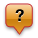
<style>
.page{position:relative;width:38px;height:38px;background:#ffffff}
.page>*{position:absolute;margin:0}
.t1{font:15.9px "HelveticaNeue-Bold";color:#000000}
</style>
<div class="page">
<p class="t1" style="left:15px;top:9px;width:9px;height:12px">?</p>
</div>
